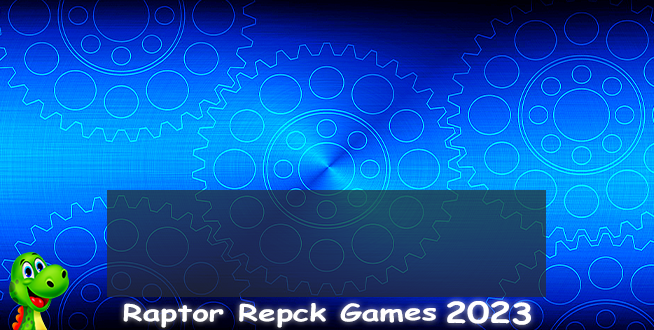
<style>
.page{position:relative;width:654px;height:330px}
.page>*{position:absolute;margin:0}
.t1{font:22.9px "ComicSansMS-Bold";color:#ffffff;scale:1.38 1}
.t2{font:29.2px "ComicSansMS-Bold";color:#ffffff;scale:1.25 1}
</style>
<div class="page">
<p class="t1" style="left:123px;top:303px;width:313px;height:25px">Raptor Repck Games</p>
<p class="t2" style="left:447px;top:301px;width:84px;height:24px;rotate:1deg">2023</p>
</div>
